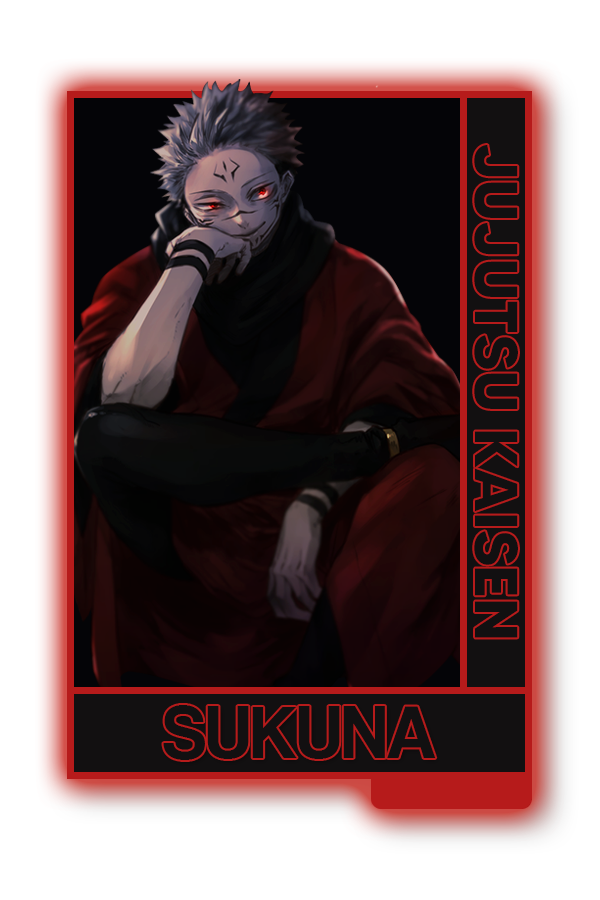
<style>
.page{position:relative;width:600px;height:900px;background:#ffffff}
.page>*{position:absolute;margin:0}
.t1{font:60.3px "MADETOMMY-Bold";color:#100e11}
.t2{font:76.4px "CoolveticaRg-Regular";color:#100e11}
</style>
<div class="page">
<p class="t1" style="left:474px;top:145px;width:44px;height:493px;rotate:90deg">JUJUTSU KAISEN</p>
<p class="t2" style="left:163px;top:705px;width:273px;height:55px">SUKUNA</p>
</div>
